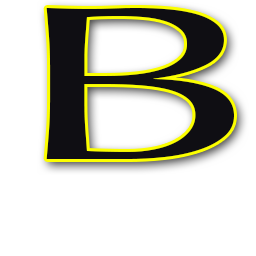
<style>
.page{position:relative;width:256px;height:256px;background:#ffffff}
.page>*{position:absolute;margin:0}
.t1{font:219.7px "Optima-Regular";color:#0f0e13;scale:1.91 1}
</style>
<div class="page">
<p class="t1" style="left:46px;top:8px;width:188px;height:151px">B</p>
</div>
